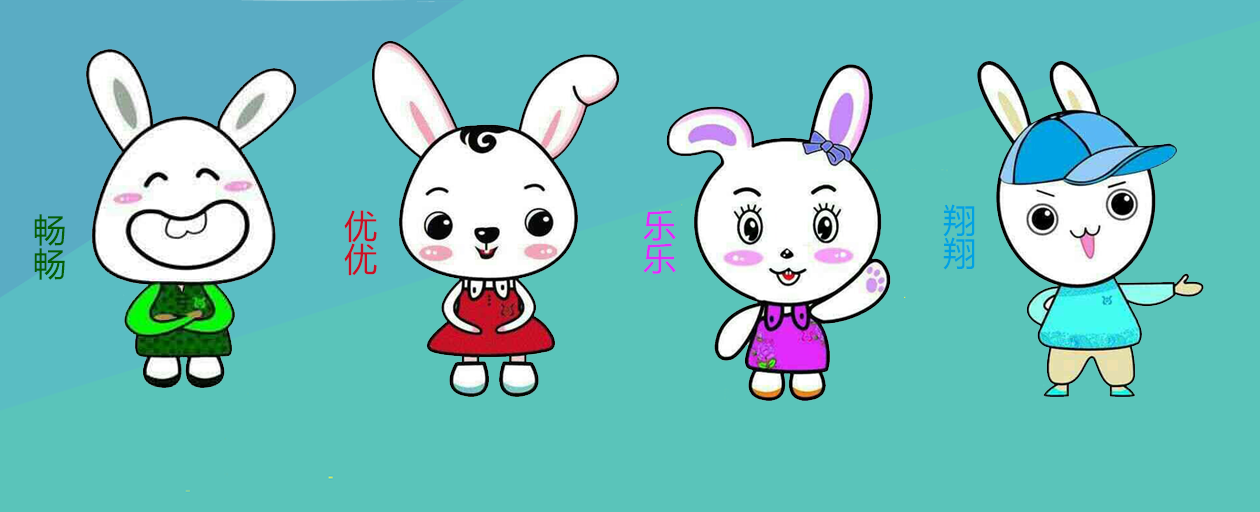
<style>
.page{position:relative;width:1260px;height:512px;background:#5ac4ba}
.page>*{position:absolute;margin:0}
.t1{font:33.3px "MicrosoftYaHei";color:#00a2e3}
.t2{font:33.3px "MicrosoftYaHei";color:#046002}
.t3{font:33.3px "MicrosoftYaHei";color:#ca1025}
.t4{font:33.3px "MicrosoftYaHei";color:#e12bfc}
</style>
<div class="page">
<p class="t1" style="left:943px;top:204px;width:32px;height:66px">翔翔</p>
<p class="t2" style="left:34px;top:214px;width:31px;height:66px">畅畅</p>
<p class="t3" style="left:344px;top:210px;width:33px;height:66px">优优</p>
<p class="t4" style="left:643px;top:210px;width:33px;height:64px">乐乐</p>
</div>
